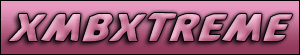
<style>
.page{position:relative;width:300px;height:55px}
.page>*{position:absolute;margin:0}
.t1{font:46px "BronicExpandedItalic"}
</style>
<div class="page">
<p class="t1" style="left:9px;top:13px;width:284px;height:29px">xmbxtreme</p>
</div>
